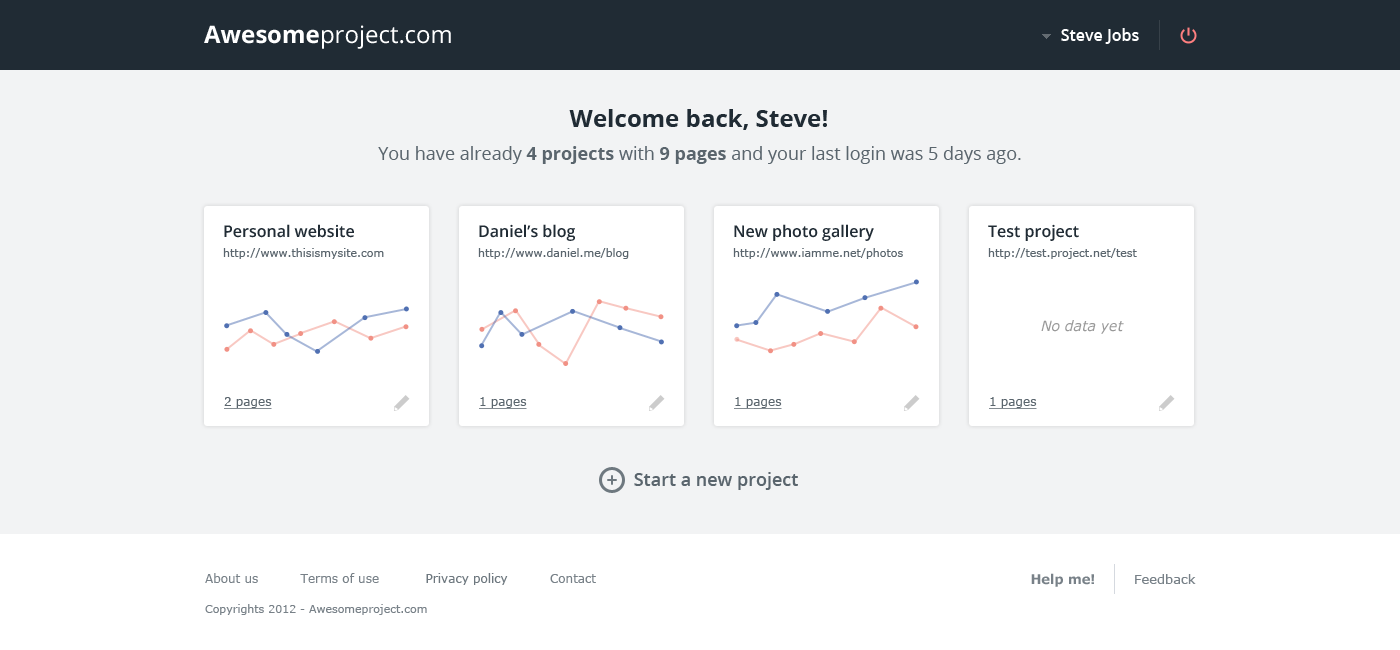
<style>
.page{position:relative;width:1400px;height:650px;background:#f2f3f4}
.page>*{position:absolute;margin:0}
.t1{font:24px "OpenSans";color:#ffffff}
.t2{font:24px "OpenSans-Bold";color:#ffffff}
.t3{font:16px "OpenSans-Semibold";color:#ffffff}
.t4{font:24px "OpenSans-Bold";color:#202b34}
.t5{font:18px "OpenSans";color:#5a656d}
.t6{font:18px "OpenSans-Bold";color:#5a656d}
.t7{font:16.2px "OpenSans-Semibold";color:#202b34}
.t8{font:11.1px "Verdana";color:#5a656d}
.t9{font:14.1px "Verdana-Italic";color:#999999}
.t10{font:12.1px "Verdana";color:#5a656d;text-decoration:underline}
.t11{font:18px "OpenSans-Semibold";color:#5a656d}
.t12{font:11.1px/30px "Verdana";color:#788188}
.t13{font:12.1px/30px "Verdana";color:#788188}
.t14{font:12.1px/30px "Verdana";color:#6e787f}
.t15{font:13.1px "Verdana-Bold";color:#788188}
.t16{font:13.1px "Verdana";color:#788188}
</style>
<div class="page">
<p class="t1" style="left:204px;top:25px;width:247px;height:24px"><span class="t2">Awesome</span>project.com</p>
<p class="t3" style="left:1061px;top:28px;width:78px;height:16px">Steve Jobs</p>
<p class="t4" style="left:569px;top:109px;width:258px;height:21px">Welcome back, Steve!</p>
<p class="t5" style="left:378px;top:146px;width:643px;height:18px">You have already <span class="t6">4 projects</span> with <span class="t6">9 pages</span> and your last login was 5 days ago.</p>
<p class="t7" style="left:224px;top:224px;width:130px;height:14px">Personal website</p>
<p class="t7" style="left:479px;top:224px;width:96px;height:17px">Daniel’s blog</p>
<p class="t7" style="left:734px;top:224px;width:140px;height:17px">New photo gallery</p>
<p class="t7" style="left:988px;top:224px;width:91px;height:17px">Test project</p>
<p class="t8" style="left:223px;top:248px;width:161px;height:11px">http://www.thisismysite.com</p>
<p class="t8" style="left:478px;top:248px;width:151px;height:11px">http://www.daniel.me/blog</p>
<p class="t8" style="left:733px;top:248px;width:170px;height:11px">http://www.iamme.net/photos</p>
<p class="t8" style="left:988px;top:248px;width:149px;height:11px">http://test.project.net/test</p>
<p class="t9" style="left:1041px;top:320px;width:83px;height:14px">No data yet</p>
<p class="t10" style="left:224px;top:397px;width:48px;height:12px">2 pages</p>
<p class="t10" style="left:479px;top:397px;width:48px;height:12px">1 pages</p>
<p class="t10" style="left:734px;top:397px;width:48px;height:12px">1 pages</p>
<p class="t10" style="left:989px;top:397px;width:48px;height:12px">1 pages</p>
<p class="t11" style="left:634px;top:472px;width:164px;height:18px">Start a new project</p>
<p class="t12" style="left:205px;top:573px;width:391px;height:42px"><span class="t13">About us          Terms of use           </span><span class="t14">Privacy policy</span><span class="t13">          Contact<br></span>Copyrights 2012 - Awesomeproject.com</p>
<p class="t15" style="left:1031px;top:573px;width:63px;height:14px">Help me!</p>
<p class="t16" style="left:1135px;top:574px;width:61px;height:10px">Feedback</p>
</div>
